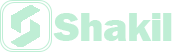
<style>
.page{position:relative;width:175px;height:52px;background:#ffffff}
.page>*{position:absolute;margin:0}
.t1{font:42.4px "FranklinGothic-Heavy";letter-spacing:-0.025em;color:#bfeed5}
</style>
<div class="page">
<p class="t1" style="left:53px;top:13px;width:119px;height:28px">Shakil</p>
</div>
